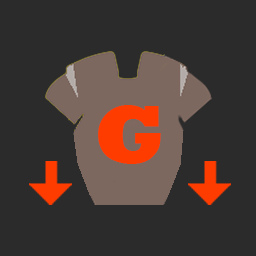
<style>
.page{position:relative;width:256px;height:256px;background:#2b2b2b}
.page>*{position:absolute;margin:0}
.t1{font:84px "Rockwell-ExtraBold";color:#ff3c00}
</style>
<div class="page">
<p class="t1" style="left:98px;top:105px;width:63px;height:59px">G</p>
</div>
